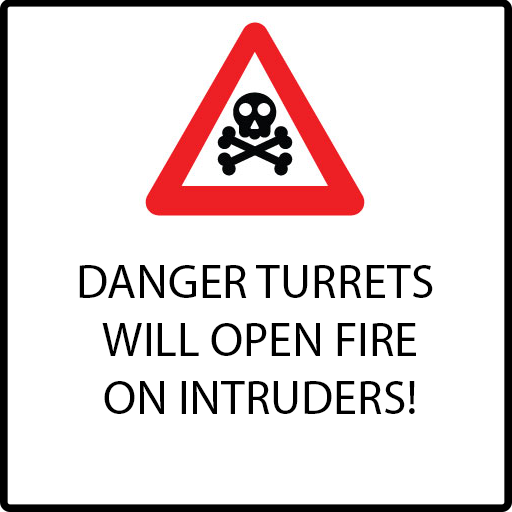
<style>
.page{position:relative;width:512px;height:512px;background:#ffffff}
.page>*{position:absolute;margin:0}
.t1{font:48px "MyriadPro-Regular";color:#000000}
</style>
<div class="page">
<p class="t1" style="left:79px;top:265px;width:354px;height:149px;text-align:center">DANGER TURRETS <br>WILL OPEN FIRE<br>ON INTRUDERS!</p>
</div>
